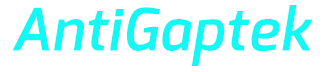
<style>
.page{position:relative;width:324px;height:72px;background:#ffffff}
.page>*{position:absolute;margin:0}
.t1{font:100px "Exo-DemiBold-Italic";letter-spacing:0.025em;color:#13f8f5}
</style>
<div class="page">
<p class="t1" style="left:12px;top:5px;width:301px;height:61px">AntiGaptek</p>
</div>
